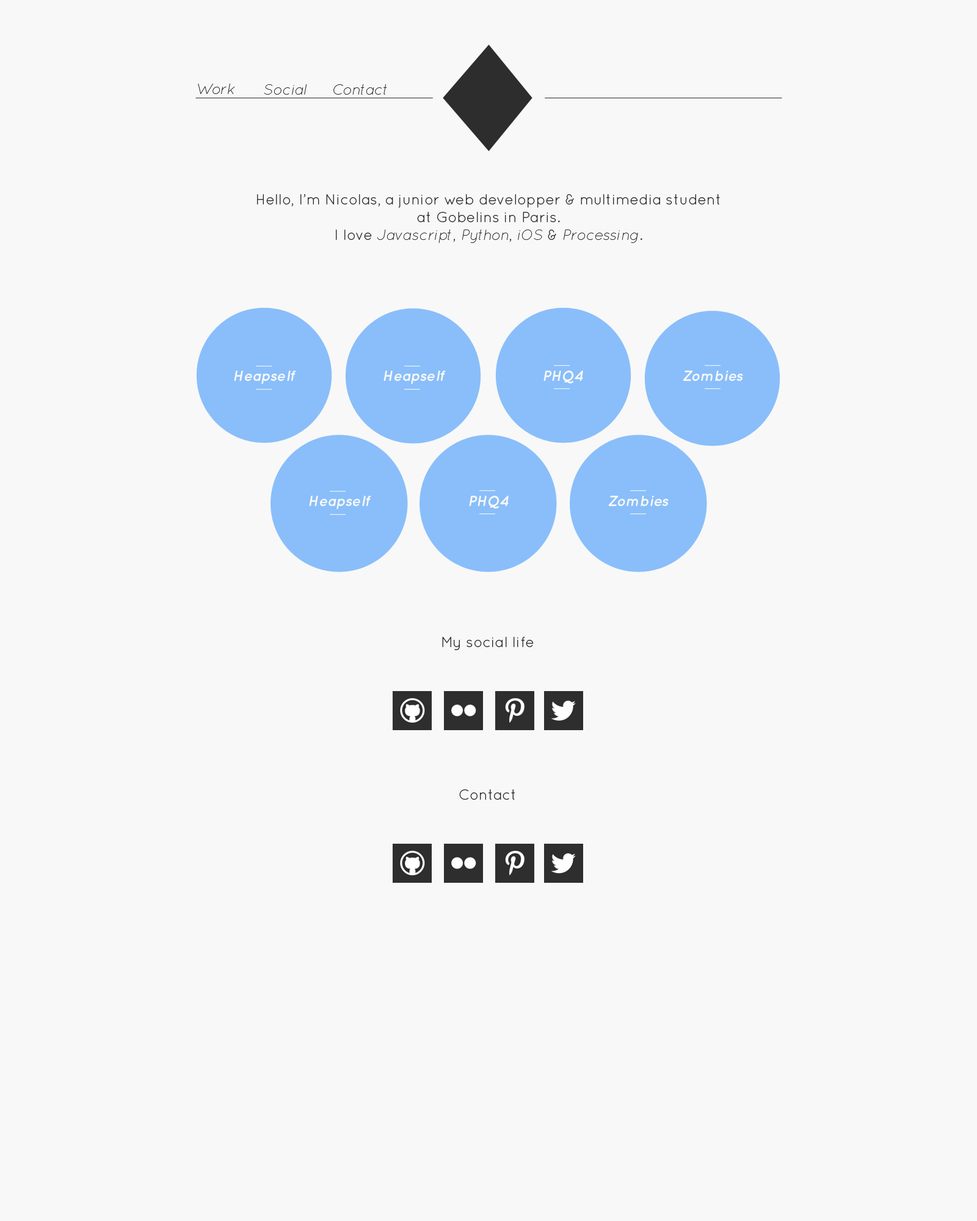
<style>
.page{position:relative;width:977px;height:1221px;background:#f8f8f8}
.page>*{position:absolute;margin:0}
.t1{font:14.7px "QuicksandLightOblique-Regular";color:#2d2d2d}
.t2{font:14.7px "QuicksandBook-Regular";color:#2d2d2d}
.t3{font:14.7px "QuicksandBoldOblique-Regular";color:#f8f8f8}
</style>
<div class="page">
<p class="t1" style="left:198px;top:84px;width:37px;height:10px">Work</p>
<p class="t1" style="left:264px;top:84px;width:42px;height:11px">Social</p>
<p class="t1" style="left:333px;top:84px;width:54px;height:11px">Contact</p>
<p class="t2" style="left:257px;top:194px;width:463px;height:49px;text-align:center">Hello, I’m Nicolas, a junior web developper &amp; multimedia student <br>at Gobelins in Paris.<br>I love <span class="t1">Javascript</span>, <span class="t1">Python</span>, <span class="t1">iOS </span>&amp; <span class="t1">Processing</span>.</p>
<p class="t3" style="left:234px;top:371px;width:62px;height:13px">Heapself</p>
<p class="t3" style="left:383px;top:371px;width:63px;height:13px">Heapself</p>
<p class="t3" style="left:543px;top:371px;width:40px;height:12px">PHQ4</p>
<p class="t3" style="left:682px;top:371px;width:61px;height:10px">Zombies</p>
<p class="t3" style="left:309px;top:496px;width:62px;height:13px">Heapself</p>
<p class="t3" style="left:469px;top:496px;width:39px;height:12px">PHQ4</p>
<p class="t3" style="left:608px;top:496px;width:60px;height:10px">Zombies</p>
<p class="t2" style="left:442px;top:637px;width:92px;height:13px">My social life</p>
<p class="t2" style="left:459px;top:789px;width:56px;height:11px">Contact</p>
</div>
